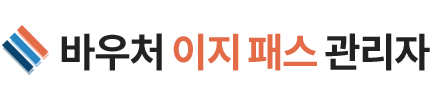
<style>
.page{position:relative;width:430px;height:100px;background:#ffffff}
.page>*{position:absolute;margin:0}
.t1{font:40px "NotoSansKR-Bold";letter-spacing:-0.05em;color:#e36b48}
.t2{font:40px "NotoSansKR-Bold";letter-spacing:-0.05em;color:#222222}
</style>
<div class="page">
<p class="t1" style="left:61px;top:33px;width:369px;height:38px"><span class="t2">바우처 </span>이지 패스 <span class="t2">관리자</span></p>
</div>
